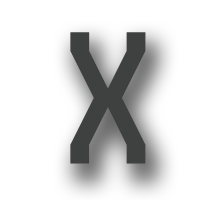
<style>
.page{position:relative;width:215px;height:200px;background:#ffffff}
.page>*{position:absolute;margin:0}
.t1{font:150px "Manteka";color:#3f4040}
</style>
<div class="page">
<p class="t1" style="left:70px;top:32px;width:76px;height:132px">X</p>
</div>
